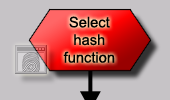
<style>
.page{position:relative;width:170px;height:100px;background:#c6c3c6}
.page>*{position:absolute;margin:0}
.t1{font:14.7px "ArialMT";color:#000000}
</style>
<div class="page">
<p class="t1" style="left:63px;top:16px;width:52px;height:47px;text-align:center">Select<br>hash<br>function</p>
</div>
